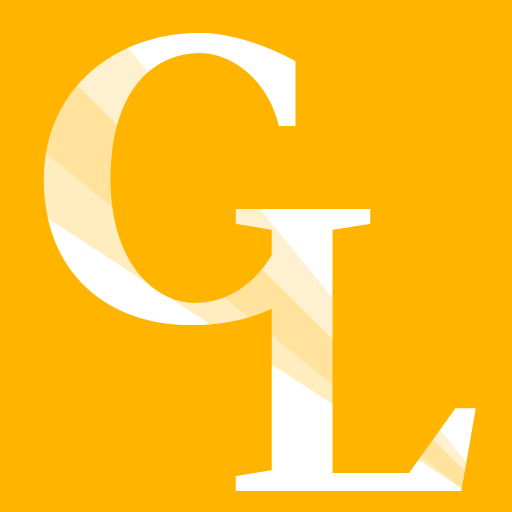
<style>
.page{position:relative;width:512px;height:512px;background:#ffb400}
.page>*{position:absolute;margin:0}
.t1{font:400px "EquityCapsB-Bold"}
.t2{font:400px "EquityCapsB-Bold";color:#ffffff}
</style>
<div class="page">
<p class="t1" style="left:43px;top:33px;width:256px;height:292px">C</p>
<p class="t2" style="left:235px;top:209px;width:241px;height:282px">L</p>
</div>
